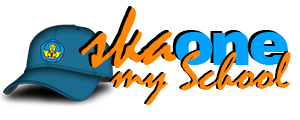
<style>
.page{position:relative;width:300px;height:120px;background:#ffffff}
.page>*{position:absolute;margin:0}
.t1{font:90.2px "Mistral";color:#ff8503}
.t2{font:61.1px "Swiss721BT-Black";color:#00a2ff}
.t3{font:54.2px "Mistral";color:#ff8503}
</style>
<div class="page">
<p class="t1" style="left:81px;top:8px;width:98px;height:60px">ska</p>
<p class="t2" style="left:175px;top:32px;width:38px;height:33px">o</p>
<p class="t2" style="left:213px;top:32px;width:36px;height:33px">n</p>
<p class="t2" style="left:250px;top:32px;width:38px;height:33px">e</p>
<p class="t3" style="left:111px;top:50px;width:180px;height:55px">my School</p>
</div>
